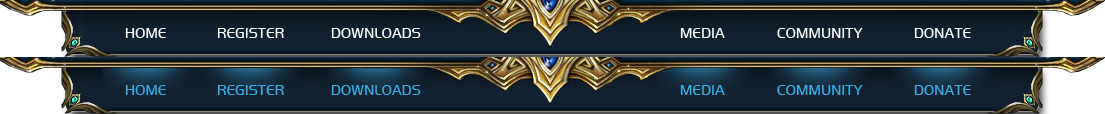
<style>
.page{position:relative;width:1105px;height:114px}
.page>*{position:absolute;margin:0}
.t1{font:15.1px "HandelGotD-Ligh";letter-spacing:0.02em;color:#ffffff;scale:0.93 1}
.t2{font:15.1px "HandelGotD-Ligh";letter-spacing:0.02em;color:#39abe6;scale:0.93 1}
</style>
<div class="page">
<p class="t1" style="left:125px;top:28px;width:41px;height:10px">HOME</p>
<p class="t1" style="left:217px;top:28px;width:67px;height:10px">REGISTER</p>
<p class="t1" style="left:331px;top:28px;width:90px;height:10px">DOWNLOADS</p>
<p class="t1" style="left:680px;top:28px;width:45px;height:10px">MEDIA</p>
<p class="t1" style="left:777px;top:28px;width:86px;height:10px">COMMUNITY</p>
<p class="t1" style="left:914px;top:28px;width:57px;height:10px">DONATE</p>
<p class="t2" style="left:125px;top:85px;width:41px;height:10px">HOME</p>
<p class="t2" style="left:217px;top:85px;width:67px;height:10px">REGISTER</p>
<p class="t2" style="left:331px;top:85px;width:90px;height:10px">DOWNLOADS</p>
<p class="t2" style="left:680px;top:85px;width:45px;height:10px">MEDIA</p>
<p class="t2" style="left:777px;top:85px;width:86px;height:10px">COMMUNITY</p>
<p class="t2" style="left:914px;top:85px;width:57px;height:10px">DONATE</p>
</div>
